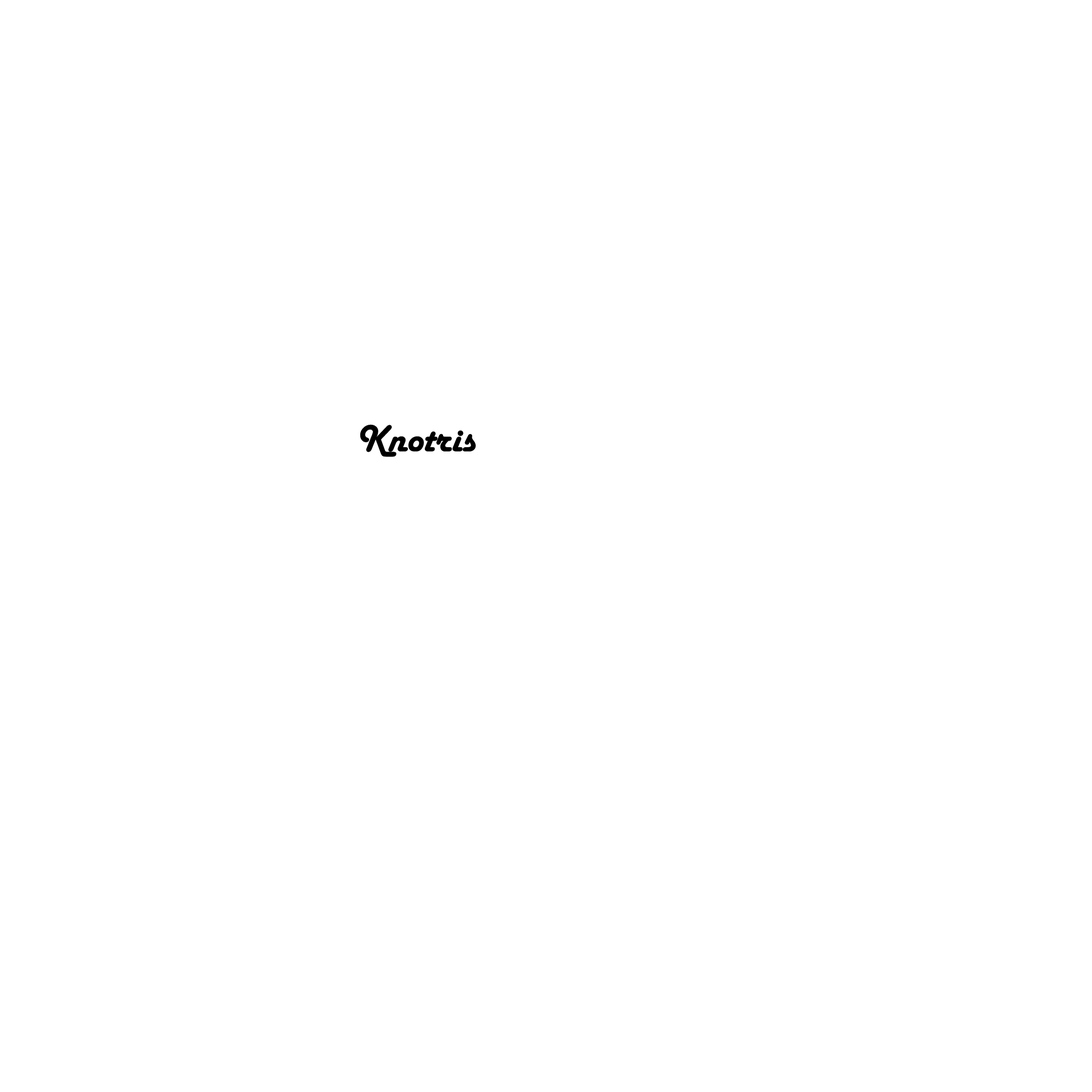
<style>
.page{position:relative;width:1092px;height:1092px;background:#ffffff}
.page>*{position:absolute;margin:0}
.t1{font:39.3px "HarlowSolid";color:#000000}
</style>
<div class="page">
<p class="t1" style="left:360px;top:424px;width:116px;height:33px">Knotris</p>
</div>
